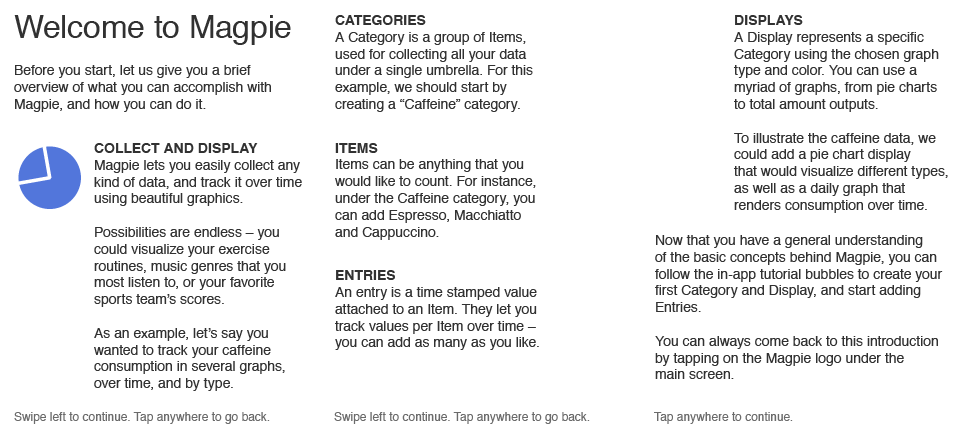
<style>
.page{position:relative;width:960px;height:440px;background:#ffffff}
.page>*{position:absolute;margin:0}
.t1{font:32px "Helvetica";color:#313131}
.t2{font:14px "Helvetica";color:#313131}
.t3{font:14px "Helvetica-Bold";color:#313131}
.t4{font:12px "Helvetica";color:#6b6b6b}
</style>
<div class="page">
<p class="t1" style="left:14px;top:15px;width:277px;height:30px">Welcome to Magpie</p>
<p class="t2" style="left:335px;top:15px;width:204px;height:335px"><span class="t3">CATEGORIES<br></span>A Category is a group of Items, <br>used for collecting all your data <br>under a single umbrella. For this <br>example, we should start by <br>creating a “Caffeine” category.<br><br><br><span class="t3">ITEMS<br></span>Items can be anything that you <br>would like to count. For instance, <br>under the Caffeine category, you <br>can add Espresso, Macchiatto <br>and Cappuccino.<br><br><br><span class="t3">ENTRIES<br></span>An entry is a time stamped value <br>attached to an Item. They let you <br>track values per Item over time –<br>you can add as many as you like.</p>
<p class="t2" style="left:734px;top:15px;width:214px;height:198px"><span class="t3">DISPLAYS<br></span>A Display represents a specific<br>Category using the chosen graph<br>type and color. You can use a <br>myriad of graphs, from pie charts<br>to total amount outputs.<br><br>To illustrate the caffeine data, we<br>could add a pie chart display<br>that would visualize different types,<br>as well as a daily graph that <br>renders consumption over time.</p>
<p class="t2" style="left:14px;top:65px;width:257px;height:47px">Before you start, let us give you a brief <br>overview of what you can accomplish with <br>Magpie, and how you can do it.</p>
<p class="t2" style="left:94px;top:143px;width:208px;height:248px"><span class="t3">COLLECT AND DISPLAY<br></span>Magpie lets you easily collect any<br>kind of data, and track it over time<br>using beautiful graphics.<br><br>Possibilities are endless – you<br>could visualize your exercise<br>routines, music genres that you<br>most listen to, or your favorite <br>sports team’s scores.<br><br>As an example, let’s say you<br>wanted to track your caffeine<br>consumption in several graphs,<br>over time, and by type.</p>
<p class="t2" style="left:655px;top:235px;width:288px;height:144px">Now that you have a general understanding<br>of the basic concepts behind Magpie, you can <br>follow the in-app tutorial bubbles to create your<br>first Category and Display, and start adding<br>Entries.<br><br>You can always come back to this introduction<br>by tapping on the Magpie logo under the<br>main screen.</p>
<p class="t4" style="left:14px;top:412px;width:256px;height:12px">Swipe left to continue. Tap anywhere to go back.</p>
<p class="t4" style="left:334px;top:412px;width:256px;height:12px">Swipe left to continue. Tap anywhere to go back.</p>
<p class="t4" style="left:654px;top:412px;width:139px;height:12px">Tap anywhere to continue.</p>
</div>
